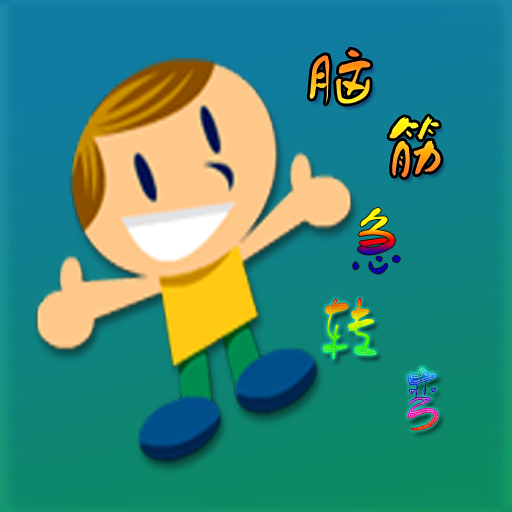
<style>
.page{position:relative;width:512px;height:512px}
.page>*{position:absolute;margin:0}
.t1{font:72px/70px "FZZJ-TTMBFONT";letter-spacing:0.02em}
.t2{font:72px "FZZJ-TTMBFONT";letter-spacing:0.02em}
</style>
<div class="page">
<p class="t1" style="left:309px;top:49px;width:132px;height:129px">脑<br>  筋</p>
<p class="t2" style="left:353px;top:207px;width:47px;height:67px">急</p>
<p class="t1" style="left:322px;top:297px;width:117px;height:134px">转<br> 弯</p>
</div>
